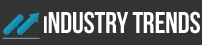
<style>
.page{position:relative;width:202px;height:45px;background:#333333}
.page>*{position:absolute;margin:0}
.t1{font:30px "BebasNeue";letter-spacing:-0.01em;color:#ffffff}
.t2{font:24px "BebasNeue";letter-spacing:-0.01em;color:#ffffff}
</style>
<div class="page">
<p class="t1" style="left:44px;top:11px;width:156px;height:23px"><span class="t2">I</span>ndustry Trends</p>
</div>
